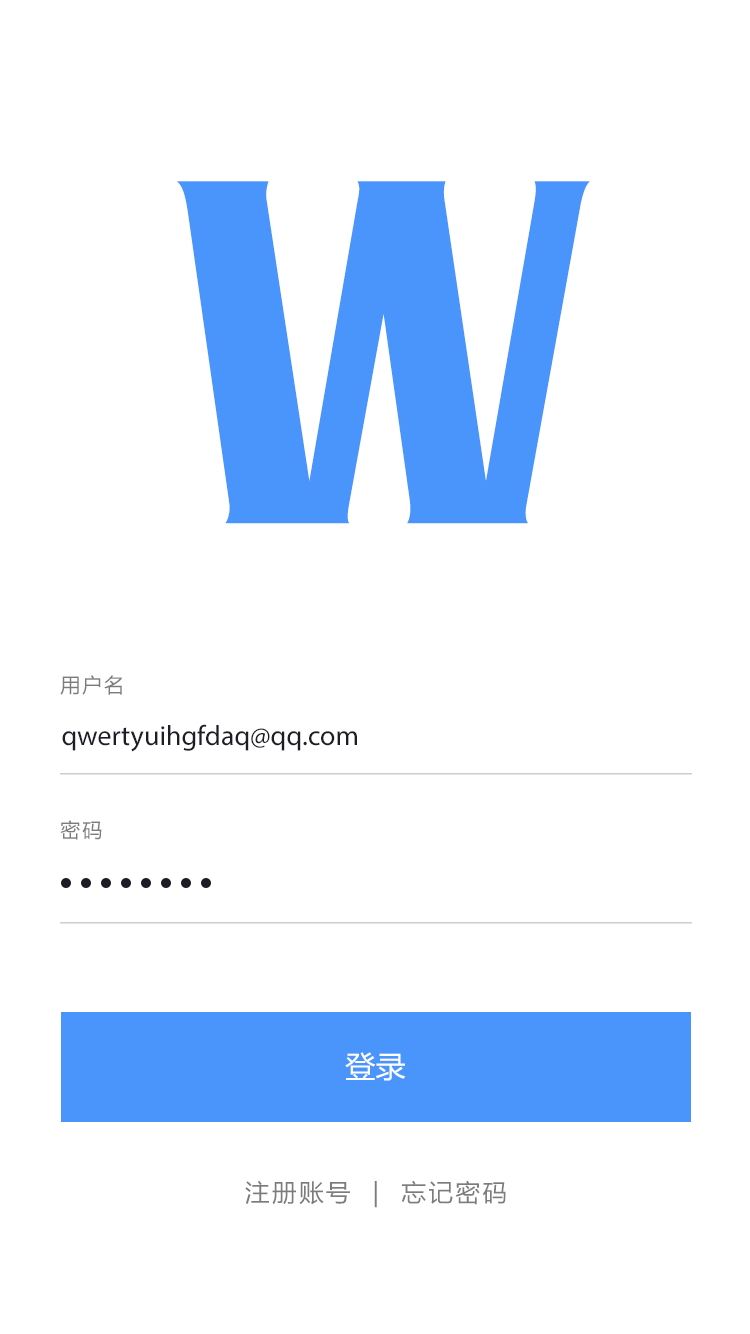
<style>
.page{position:relative;width:750px;height:1334px;background:#ffffff}
.page>*{position:absolute;margin:0}
.t1{font:431.5px "MFYiHei_Noncommercial-Regular";letter-spacing:0.1em;color:#4a95fc}
.t2{font:20px "MicrosoftYaHei";letter-spacing:0.1em;color:#7c7c7f}
.t3{font:28px "MyriadPro-Regular";color:#1d1d26}
.t4{font:30px "MicrosoftYaHei";color:#ffffff}
.t5{font:24.3px "MicrosoftYaHei";letter-spacing:0.1em;color:#7c7c7f}
</style>
<div class="page">
<p class="t1" style="left:177px;top:181px;width:413px;height:343px">W</p>
<p class="t2" style="left:60px;top:675px;width:62px;height:20px">用户名</p>
<p class="t3" style="left:62px;top:724px;width:295px;height:28px">qwertyuihgfdaq@qq.com</p>
<p class="t2" style="left:60px;top:820px;width:42px;height:20px">密码</p>
<p class="t4" style="left:345px;top:1052px;width:61px;height:29px">登录</p>
<p class="t5" style="left:245px;top:1180px;width:261px;height:28px">注册账号  |  忘记密码</p>
</div>
